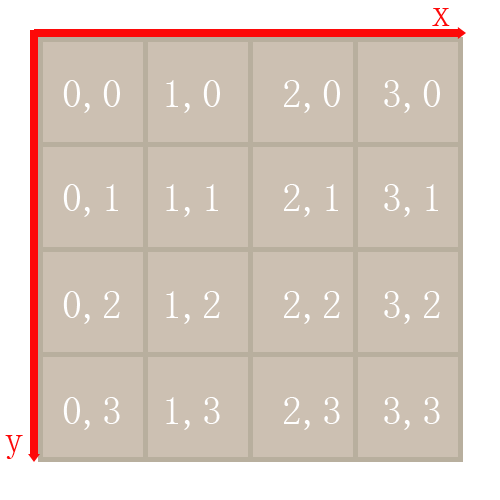
<style>
.page{position:relative;width:500px;height:500px;background:#ccc0b2}
.page>*{position:absolute;margin:0}
.t1{font:40px "SimSun";color:#fd0909}
.t2{font:40px/106.7px "SimSun";color:#ffffff}
.t3{font:40px/93.4px "SimSun";color:#ffffff}
</style>
<div class="page">
<p class="t1" style="left:432px;top:8px;width:18px;height:18px">x</p>
<p class="t2" style="left:63px;top:80px;width:377px;height:350px"><span class="t3">0,0  1,0   2,0  3,0<br></span>0,1  1,1   2,1  3,1<br>0,2  1,2   2,2  3,2<br>0,3  1,3   2,3  3,3</p>
<p class="t1" style="left:5px;top:435px;width:18px;height:24px">y</p>
</div>
